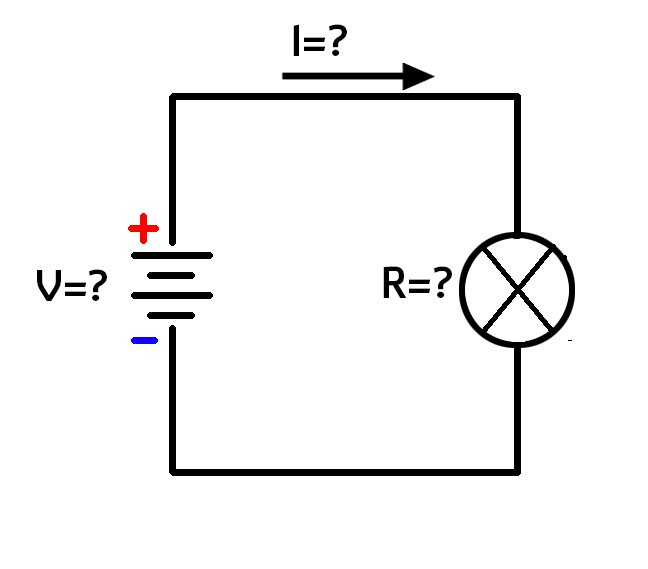
<style>
.page{position:relative;width:648px;height:569px;background:#ffffff}
.page>*{position:absolute;margin:0}
.t1{font:45.8px "LTReponseBold";color:#000000}
</style>
<div class="page">
<p class="t1" style="left:293px;top:24px;width:54px;height:32px">I=?</p>
<p class="t1" style="left:37px;top:269px;width:70px;height:32px">V=?</p>
<p class="t1" style="left:383px;top:266px;width:69px;height:32px">R=?</p>
</div>
